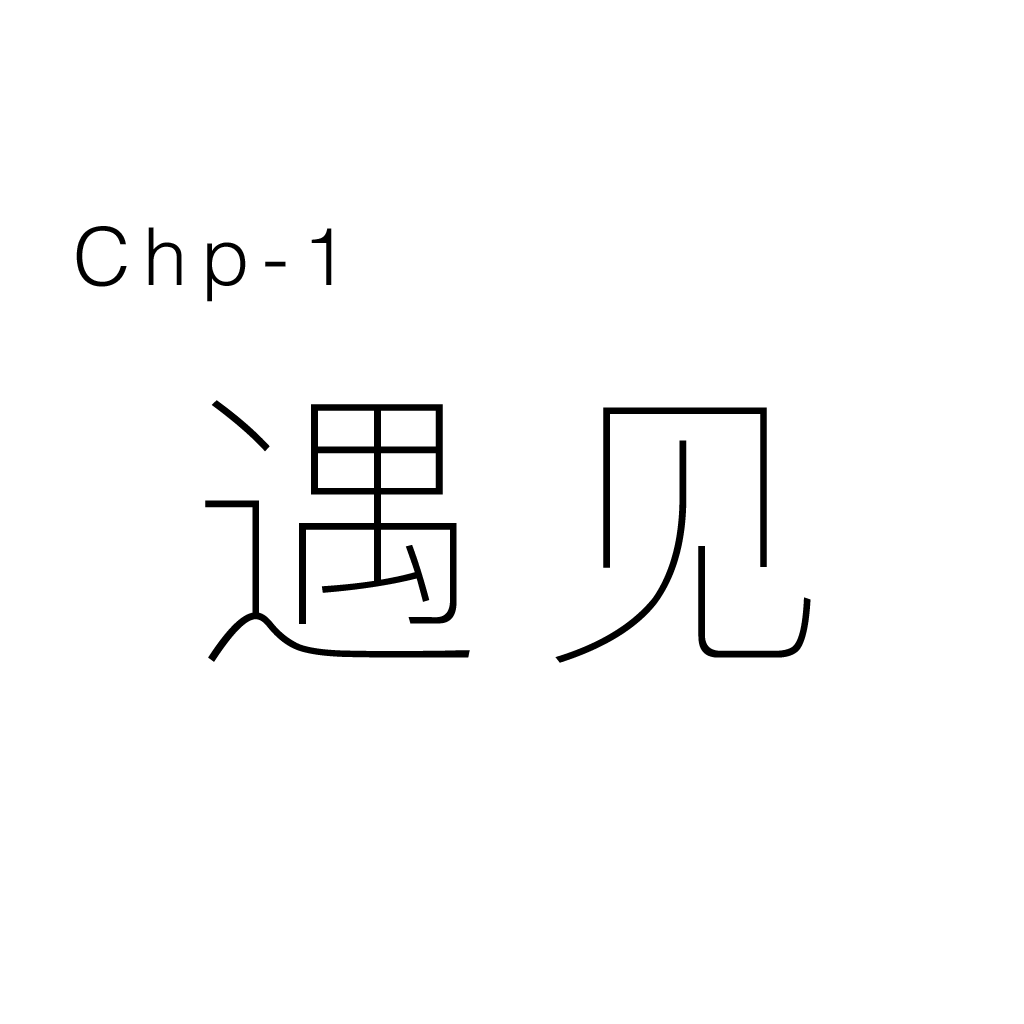
<style>
.page{position:relative;width:1024px;height:1024px;background:#ffffff}
.page>*{position:absolute;margin:0}
.t1{font:80px "Helvetica-Light";letter-spacing:0.16em;color:#000000}
.t2{font:300px "PingFangSC-Ultralight";letter-spacing:0.16em;color:#000000}
</style>
<div class="page">
<p class="t1" style="left:76px;top:226px;width:256px;height:76px">Chp-1</p>
<p class="t2" style="left:205px;top:400px;width:606px;height:263px">遇见</p>
</div>
